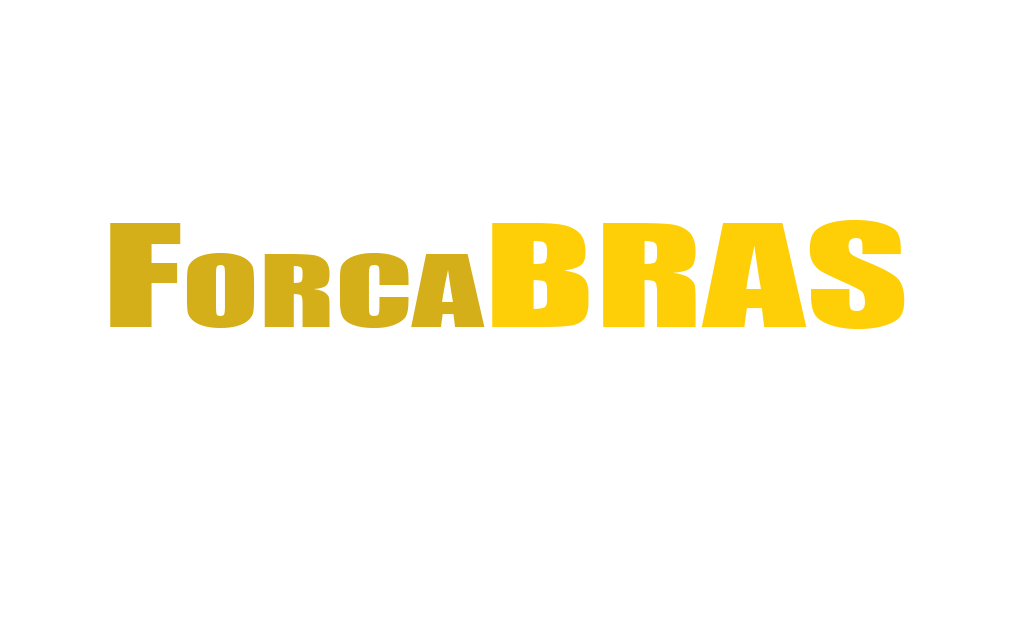
<style>
.page{position:relative;width:1025px;height:641px;background:#ffffff}
.page>*{position:absolute;margin:0}
.t1{font:226.4px "Impact";color:#d4af1a;font-variant:small-caps;scale:1.52 1}
.t2{font:169.8px "SegoeScript-Bold";color:#036c6f;font-variant:small-caps;scale:1.52 1}
.t3{font:226.4px "Impact";color:#fece07;font-variant:small-caps;scale:1.52 1}
</style>
<div class="page">
<p class="t1" style="left:110px;top:220px;width:795px;height:109px"><span class="t2">    </span>Forca<span class="t3">BRAS</span></p>
</div>
